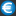
<style>
.page{position:relative;width:16px;height:16px}
.page>*{position:absolute;margin:0}
.t1{font:14px "ArialMT";letter-spacing:-0.52em;color:#ffffff;scale:1.24 1}
</style>
<div class="page">
<p class="t1" style="left:2px;top:2px;width:10px;height:11px">€</p>
</div>
